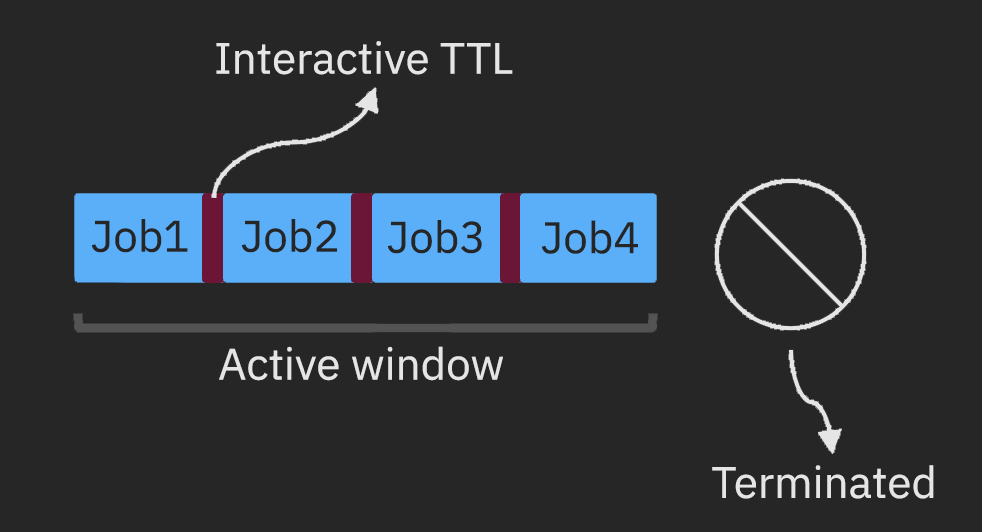
<style>
.page{position:relative;width:982px;height:532px;background:#262626}
.page>*{position:absolute;margin:0}
.t1{font:44px "IBMPlexSans-Regular";color:#e5e5e5}
.t2{font:44px "IBMPlexSans-Regular";color:#262626}
</style>
<div class="page">
<p class="t1" style="left:216px;top:41px;width:297px;height:34px">Interactive TTL</p>
<p class="t2" style="left:91px;top:219px;width:97px;height:34px">Job1</p>
<p class="t2" style="left:241px;top:219px;width:96px;height:34px">Job2</p>
<p class="t2" style="left:387px;top:220px;width:95px;height:34px">Job3</p>
<p class="t2" style="left:541px;top:220px;width:97px;height:34px">Job4</p>
<p class="t1" style="left:219px;top:346px;width:284px;height:35px">Active window</p>
<p class="t1" style="left:712px;top:465px;width:222px;height:34px">Terminated</p>
</div>
